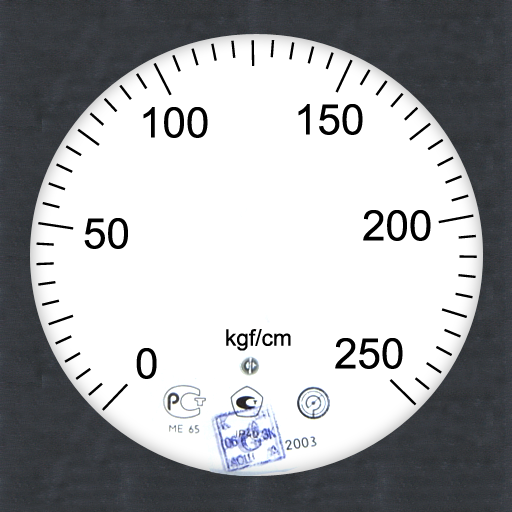
<style>
.page{position:relative;width:512px;height:512px;background:#ffffff}
.page>*{position:absolute;margin:0}
.t1{font:72.3px "ArialMT";color:#000000}
.t2{font:39px "ArialMT";color:#000000}
</style>
<div class="page">
<p class="t1" style="left:143px;top:107px;width:65px;height:31px">100</p>
<p class="t1" style="left:298px;top:104px;width:65px;height:31px">150</p>
<p class="t1" style="left:84px;top:218px;width:44px;height:31px">50</p>
<p class="t1" style="left:363px;top:210px;width:68px;height:31px">200</p>
<p class="t2" style="left:226px;top:329px;width:65px;height:22px">kgf/cm</p>
<p class="t1" style="left:335px;top:338px;width:68px;height:31px">250</p>
<p class="t1" style="left:136px;top:348px;width:21px;height:31px">0</p>
</div>
